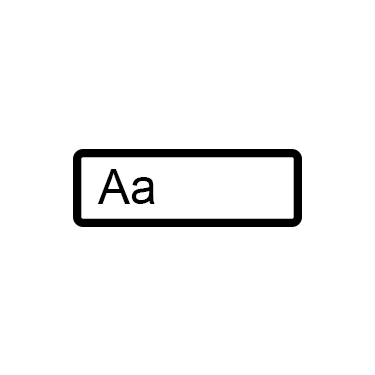
<style>
.page{position:relative;width:375px;height:375px;background:#ffffff}
.page>*{position:absolute;margin:0}
.t1{font:48px "ArialMT";color:#000000}
</style>
<div class="page">
<p class="t1" style="left:97px;top:169px;width:58px;height:35px">Aa</p>
</div>
